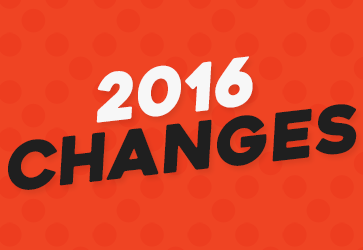
<style>
.page{position:relative;width:363px;height:250px;background:#ef4423}
.page>*{position:absolute;margin:0}
.t1{font:65.6px "Heavitas";color:#f7f7f7;font-style:italic}
.t2{font:65.6px "Heavitas";color:#1f1f1f;font-style:italic}
</style>
<div class="page">
<p class="t1" style="left:96px;top:56px;width:157px;height:67px;rotate:-7deg">2016</p>
<p class="t2" style="left:8px;top:104px;width:349px;height:86px;rotate:-7deg">cHANGES</p>
</div>
